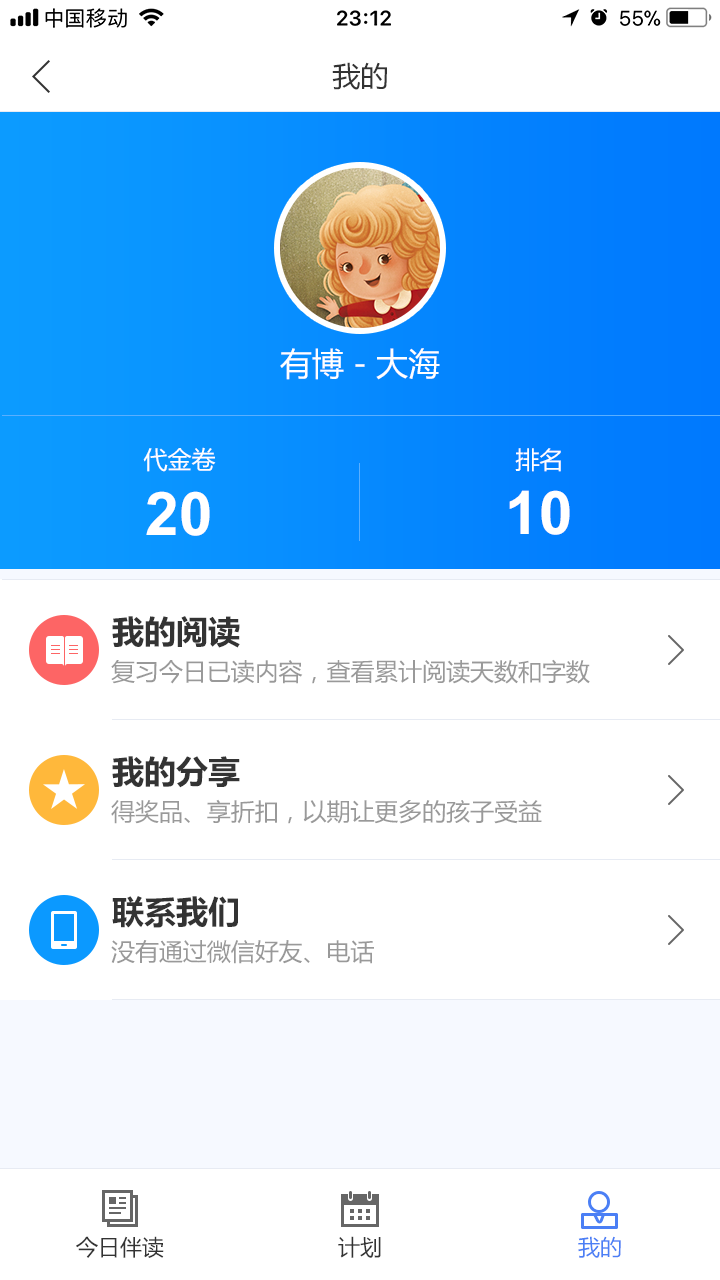
<style>
.page{position:relative;width:720px;height:1280px;background:#ffffff}
.page>*{position:absolute;margin:0}
.t1{font:28px "MicrosoftYaHei";color:#333333}
.t2{font:32px "MicrosoftYaHei";color:#ffffff}
.t3{font:24px "MicrosoftYaHei";color:#ffffff}
.t4{font:60px "Arial-BoldMT";color:#ffffff}
.t5{font:32px "MicrosoftYaHei-Bold";color:#333333}
.t6{font:24px "MicrosoftYaHei";color:#999999}
.t7{font:22px "MicrosoftYaHei";color:#333333}
.t8{font:22px "MicrosoftYaHei";color:#4b7ff5}
</style>
<div class="page">
<p class="t1" style="left:332px;top:62px;width:55px;height:28px">我的</p>
<p class="t2" style="left:280px;top:348px;width:160px;height:32px">有博 - 大海</p>
<p class="t3" style="left:143px;top:447px;width:73px;height:25px">代金卷</p>
<p class="t3" style="left:515px;top:448px;width:46px;height:24px">排名</p>
<p class="t4" style="left:146px;top:491px;width:64px;height:45px">20</p>
<p class="t4" style="left:509px;top:490px;width:61px;height:45px">10</p>
<p class="t5" style="left:112px;top:616px;width:128px;height:32px">我的阅读</p>
<p class="t6" style="left:111px;top:659px;width:479px;height:25px">复习今日已读内容，查看累计阅读天数和字数</p>
<p class="t5" style="left:112px;top:756px;width:128px;height:32px">我的分享</p>
<p class="t6" style="left:111px;top:799px;width:431px;height:25px">得奖品、享折扣，以期让更多的孩子受益</p>
<p class="t5" style="left:112px;top:896px;width:126px;height:32px">联系我们</p>
<p class="t6" style="left:111px;top:940px;width:263px;height:24px">没有通过微信好友、电话</p>
<p class="t7" style="left:76px;top:1236px;width:88px;height:22px">今日伴读</p>
<p class="t7" style="left:338px;top:1236px;width:43px;height:22px">计划</p>
<p class="t8" style="left:578px;top:1236px;width:43px;height:22px">我的</p>
</div>
